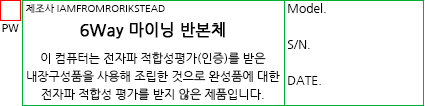
<style>
.page{position:relative;width:425px;height:106px;background:#ffffff}
.page>*{position:absolute;margin:0}
.t1{font:12px/18px "NanumGothic";color:#000000}
.t2{font:10px/18px "NanumGothic";color:#000000}
.t3{font:16px/30px "NanumGothic";color:#000000;font-weight:bold}
.t4{font:12px/36px "NanumGothic";color:#000000}
.t5{font:11px "NanumBarunGothic";color:#000000}
</style>
<div class="page">
<p class="t1" style="left:26px;top:4px;width:254px;height:96px"><span class="t2">제조사 IAMFROMRORIKSTEAD<br></span><span class="t3">6Way 마이닝 반본체<br></span>이 컴퓨터는 전자파 적합성평가(인증)를 받은<br>내장구성품을 사용해 조립한 것으로 완성품에 대한<br>전자파 적합성 평가를 받지 않은 제품입니다.</p>
<p class="t4" style="left:288px;top:3px;width:38px;height:82px">Model.<br>S/N.<br>DATE.</p>
<p class="t5" style="left:2px;top:24px;width:17px;height:8px">PW</p>
</div>
